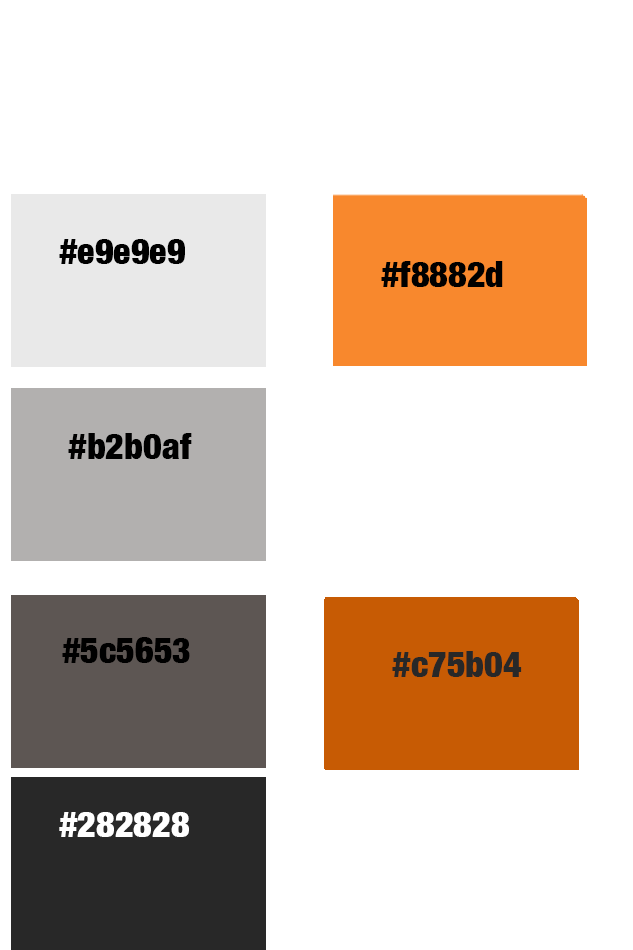
<style>
.page{position:relative;width:633px;height:950px;background:#ffffff}
.page>*{position:absolute;margin:0}
.t1{font:36px "HelveticaNeue-CondensedBlack";color:#000000}
.t2{font:36px "HelveticaNeue-CondensedBlack";color:#282828}
.t3{font:36px "HelveticaNeue-CondensedBlack";color:#ffffff}
</style>
<div class="page">
<p class="t1" style="left:59px;top:239px;width:126px;height:25px">#e9e9e9</p>
<p class="t1" style="left:381px;top:261px;width:122px;height:26px">#f8882d</p>
<p class="t1" style="left:68px;top:433px;width:124px;height:26px">#b2b0af</p>
<p class="t1" style="left:62px;top:637px;width:128px;height:26px">#5c5653</p>
<p class="t2" style="left:392px;top:651px;width:130px;height:26px">#c75b04</p>
<p class="t3" style="left:59px;top:812px;width:130px;height:25px">#282828</p>
</div>
